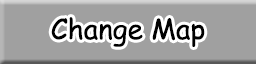
<style>
.page{position:relative;width:256px;height:64px;background:#a0a0a0}
.page>*{position:absolute;margin:0}
.t1{font:28px "ComicSansMS";color:#000000}
</style>
<div class="page">
<p class="t1" style="left:51px;top:17px;width:154px;height:30px">Change Map</p>
</div>
